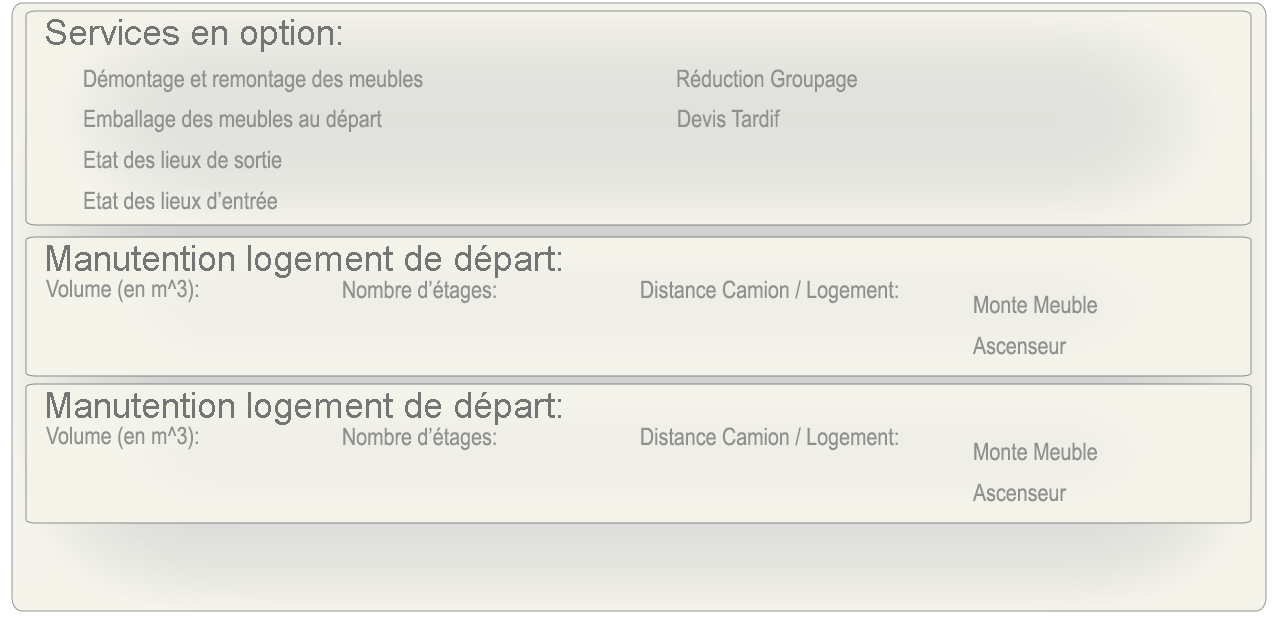
<style>
.page{position:relative;width:1280px;height:621px}
.page>*{position:absolute;margin:0}
.t1{font:36px "ArialMT";color:#757575}
.t2{font:24px "ArialNarrow";color:#909090}
</style>
<div class="page">
<p class="t1" style="left:46px;top:19px;width:295px;height:33px">Services en option:</p>
<p class="t2" style="left:84px;top:69px;width:339px;height:24px">Démontage et remontage des meubles</p>
<p class="t2" style="left:677px;top:69px;width:180px;height:24px">Réduction Groupage</p>
<p class="t2" style="left:84px;top:109px;width:298px;height:24px">Emballage des meubles au départ</p>
<p class="t2" style="left:678px;top:109px;width:103px;height:19px">Devis Tardif</p>
<p class="t2" style="left:84px;top:150px;width:198px;height:19px">Etat des lieux de sortie</p>
<p class="t2" style="left:84px;top:191px;width:193px;height:19px">Etat des lieux d’entrée</p>
<p class="t1" style="left:47px;top:245px;width:514px;height:33px">Manutention logement de départ:</p>
<p class="t2" style="left:46px;top:279px;width:152px;height:24px">Volume (en m^3):</p>
<p class="t2" style="left:343px;top:280px;width:153px;height:24px">Nombre d’étages:</p>
<p class="t2" style="left:641px;top:280px;width:257px;height:24px">Distance Camion / Logement:</p>
<p class="t2" style="left:974px;top:295px;width:123px;height:19px">Monte Meuble</p>
<p class="t2" style="left:972px;top:336px;width:95px;height:19px">Ascenseur</p>
<p class="t1" style="left:47px;top:392px;width:514px;height:33px">Manutention logement de départ:</p>
<p class="t2" style="left:46px;top:426px;width:152px;height:24px">Volume (en m^3):</p>
<p class="t2" style="left:343px;top:427px;width:153px;height:24px">Nombre d’étages:</p>
<p class="t2" style="left:641px;top:427px;width:257px;height:24px">Distance Camion / Logement:</p>
<p class="t2" style="left:974px;top:442px;width:123px;height:19px">Monte Meuble</p>
<p class="t2" style="left:972px;top:483px;width:95px;height:19px">Ascenseur</p>
</div>
